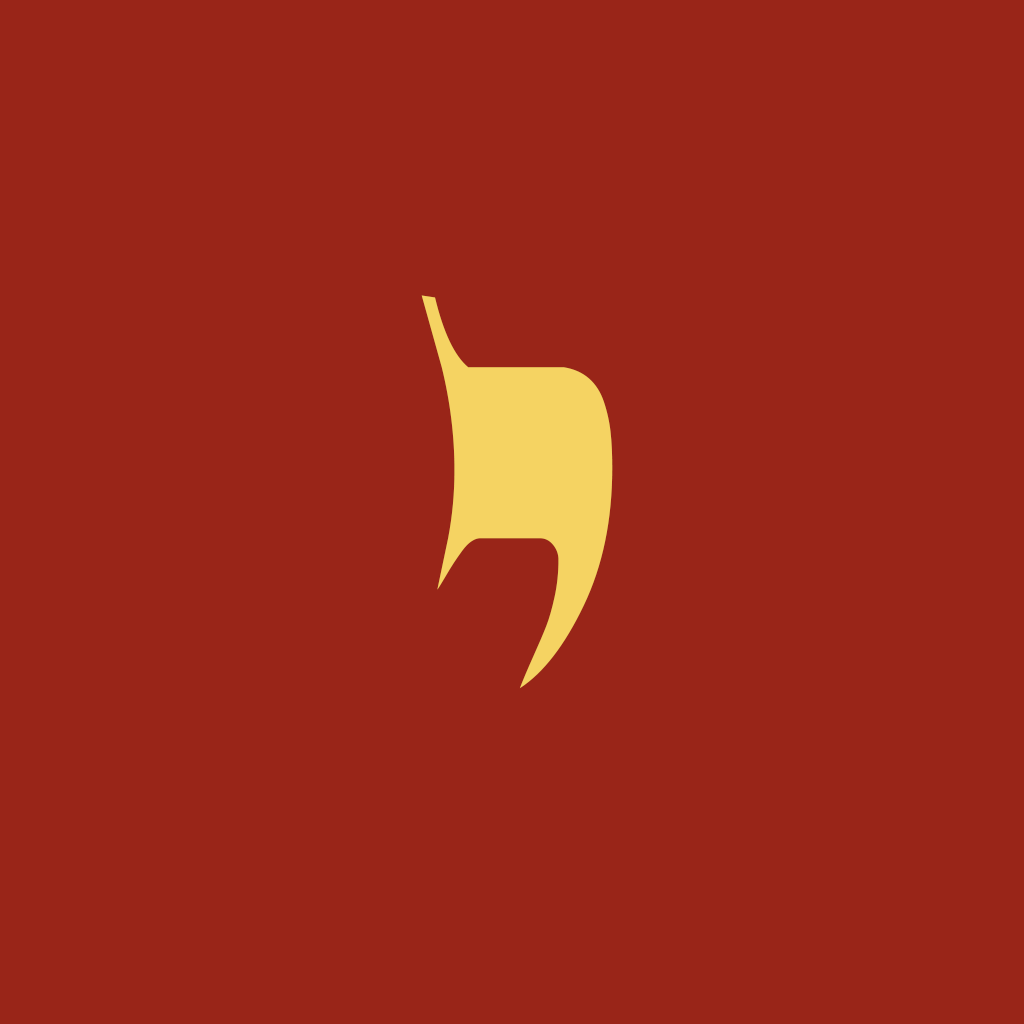
<style>
.page{position:relative;width:1024px;height:1024px;background:#992518}
.page>*{position:absolute;margin:0}
.t1{font:1000px "StamAshkenazCLM";color:#f5d362}
</style>
<div class="page">
<p class="t1" style="left:421px;top:295px;width:192px;height:394px">י</p>
</div>
